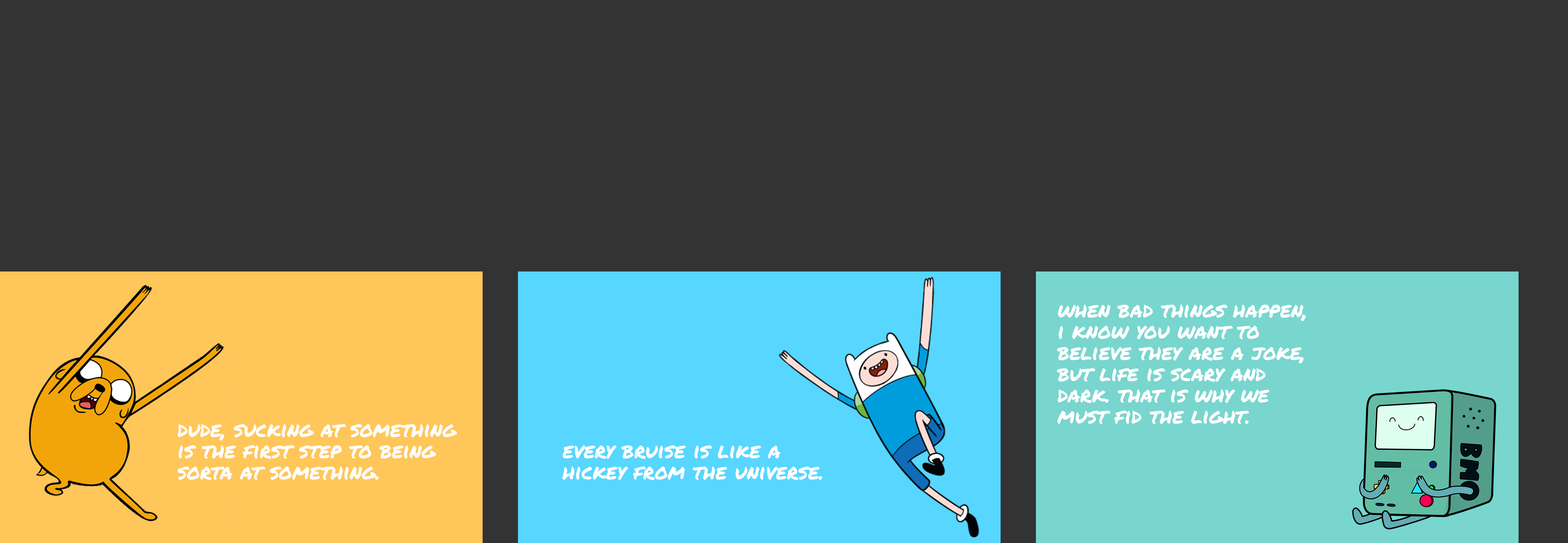
<style>
.page{position:relative;width:1568px;height:543px;background:#333333}
.page>*{position:absolute;margin:0}
.t1{font:21.2px/21.2px "PermanentMarker-Regular";color:#ffffff}
.t2{font:21.2px "PermanentMarker-Regular";color:#ffffff}
</style>
<div class="page">
<p class="t1" style="left:1057px;top:304px;width:249px;height:120px">when bad things happen, i know you want to <br>believe they are a joke, but life is scary and dark. that is why we must fid the light.</p>
<p class="t1" style="left:177px;top:424px;width:280px;height:56px">dude, sucking at something is the first step to being sorta at something.</p>
<p class="t2" style="left:562px;top:445px;width:260px;height:35px">every bruise is like a hickey from the universe.</p>
</div>
